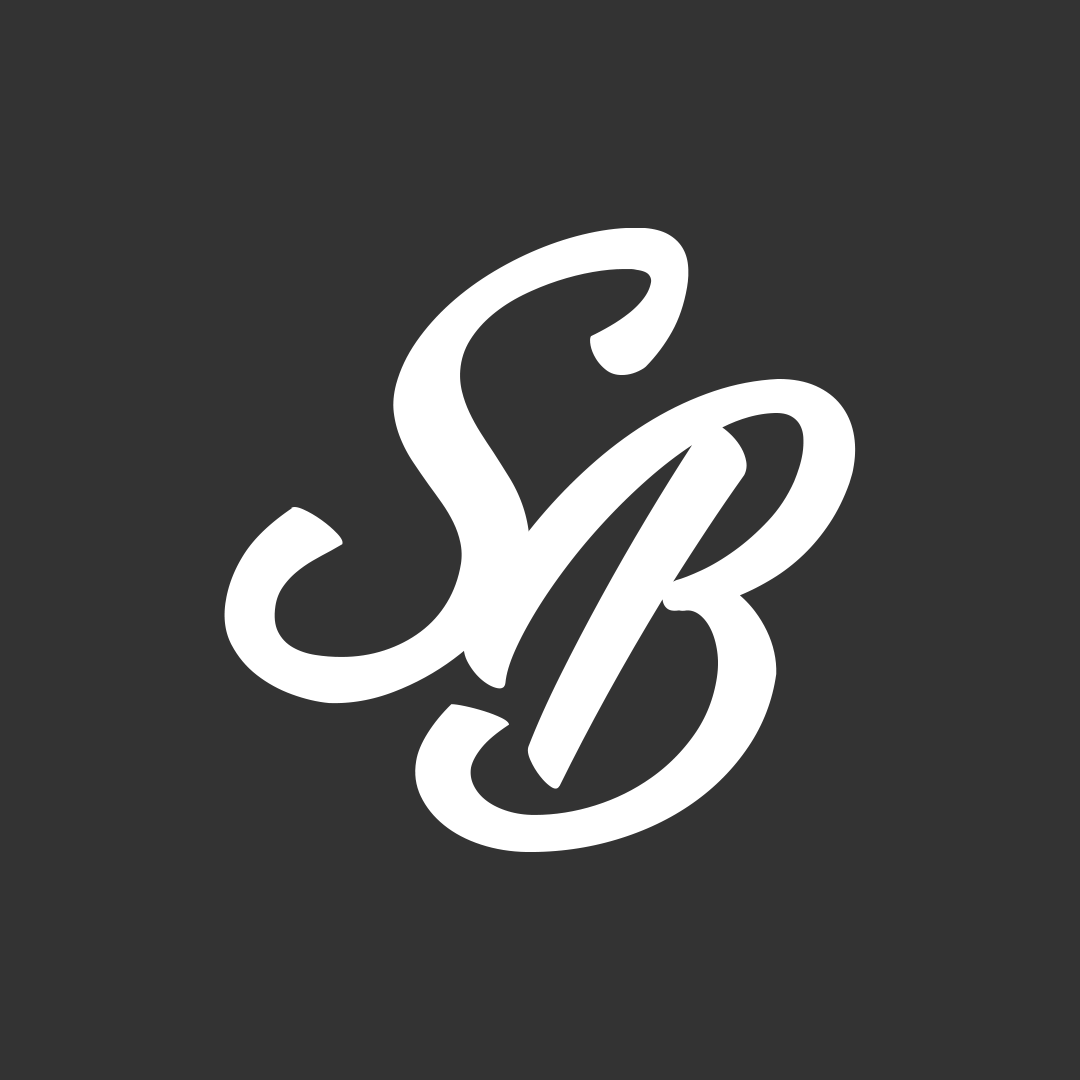
<style>
.page{position:relative;width:1080px;height:1080px;background:#333333}
.page>*{position:absolute;margin:0}
.t1{font:400px "VeganStylePersonalUse";letter-spacing:0.01em;color:#ffffff}
</style>
<div class="page">
<p class="t1" style="left:224px;top:228px;width:465px;height:476px">S</p>
<p class="t1" style="left:415px;top:379px;width:441px;height:473px">B</p>
</div>
